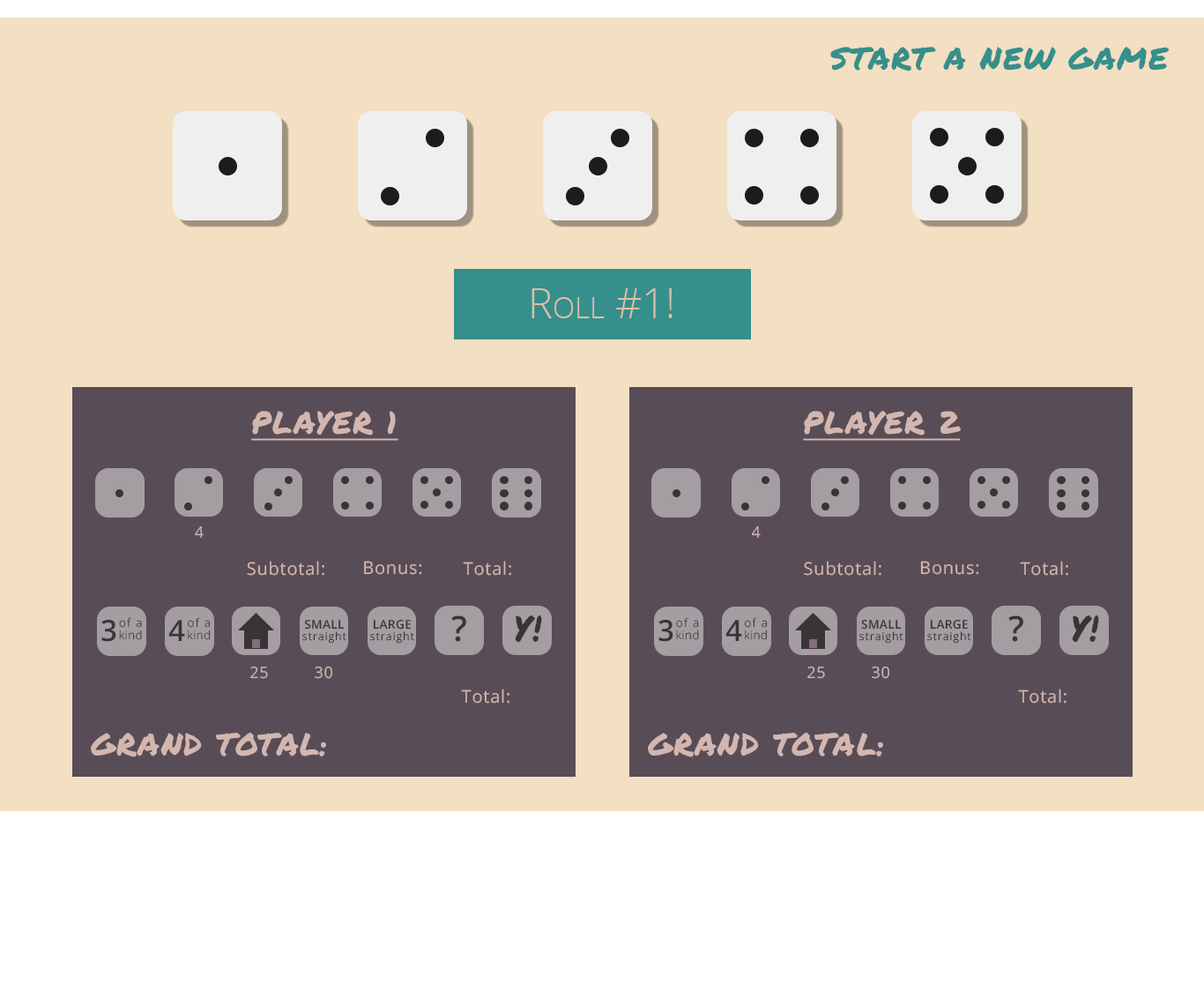
<style>
.page{position:relative;width:1204px;height:991px;background:#f3dfc1}
.page>*{position:absolute;margin:0}
.t1{font:31.1px "PermanentMarker";letter-spacing:0.04em;color:#368f8b;text-transform:uppercase}
.t2{font:41.1px "OpenSans-Light";color:#d3b6af;font-variant:small-caps}
.t3{font:31.1px "PermanentMarker";letter-spacing:0.04em;color:#d3b6af;text-transform:uppercase;text-decoration:underline}
.t4{font:15.9px "OpenSans";letter-spacing:0.04em;color:#d3b6af;text-transform:uppercase}
.t5{font:17.6px "OpenSans";letter-spacing:0.04em;color:#d3b6af}
.t6{font:11.7px/11.7px "OpenSans-Light";letter-spacing:0.1em}
.t7{font:11.7px/11.7px "OpenSans-Light";letter-spacing:0.04em}
.t8{font:34.7px "OpenSans-Semibold";letter-spacing:0.04em;color:#3a3439;text-transform:uppercase}
.t9{font:34.7px "PermanentMarker";letter-spacing:0.04em;color:#3a3439;text-transform:uppercase}
.t10{font:29.3px "OpenSans-Semibold";letter-spacing:0.04em;color:#3a3439;text-transform:uppercase}
.t11{font:10.8px/11.4px "OpenSans-Light";letter-spacing:0.1em;color:#3a3439}
.t12{font:12.1px/11.4px "OpenSans-Semibold";letter-spacing:0.02em;color:#3a3439;text-transform:uppercase}
.t13{font:31.1px "PermanentMarker";letter-spacing:0.04em;color:#d3b6af;text-transform:uppercase}
</style>
<div class="page">
<p class="t1" style="left:830px;top:47px;width:339px;height:24px">start a new game</p>
<p class="t2" style="left:531px;top:288px;width:141px;height:30px">Roll #1!</p>
<p class="t3" style="left:251px;top:411px;width:147px;height:30px">player 1</p>
<p class="t3" style="left:803px;top:411px;width:158px;height:30px">player 2</p>
<p class="t4" style="left:195px;top:526px;width:9px;height:12px">4</p>
<p class="t4" style="left:751px;top:525px;width:10px;height:13px">4</p>
<p class="t5" style="left:247px;top:560px;width:77px;height:15px">Subtotal:</p>
<p class="t5" style="left:364px;top:560px;width:58px;height:15px">Bonus:</p>
<p class="t5" style="left:463px;top:560px;width:48px;height:15px">Total:</p>
<p class="t5" style="left:804px;top:560px;width:77px;height:15px">Subtotal:</p>
<p class="t5" style="left:920px;top:560px;width:59px;height:15px">Bonus:</p>
<p class="t5" style="left:1020px;top:560px;width:48px;height:15px">Total:</p>
<p class="t6" style="left:119px;top:617px;width:23px;height:23px;text-align:center">of a <span class="t7">kind</span></p>
<p class="t6" style="left:188px;top:617px;width:23px;height:23px;text-align:center">of a <span class="t7">kind</span></p>
<p class="t8" style="left:451px;top:615px;width:15px;height:27px">?</p>
<p class="t9" style="left:515px;top:614px;width:27px;height:28px">y!</p>
<p class="t6" style="left:676px;top:617px;width:23px;height:23px;text-align:center">of a <span class="t7">kind</span></p>
<p class="t6" style="left:745px;top:617px;width:22px;height:23px;text-align:center">of a <span class="t7">kind</span></p>
<p class="t8" style="left:1008px;top:615px;width:15px;height:27px">?</p>
<p class="t9" style="left:1072px;top:614px;width:27px;height:28px">y!</p>
<p class="t10" style="left:101px;top:620px;width:15px;height:22px">3</p>
<p class="t10" style="left:168px;top:620px;width:17px;height:21px">4</p>
<p class="t11" style="left:302px;top:619px;width:44px;height:24px;text-align:center"><span class="t12">Small<br></span>straight</p>
<p class="t11" style="left:370px;top:619px;width:44px;height:24px;text-align:center"><span class="t12">large<br></span>straight</p>
<p class="t10" style="left:658px;top:620px;width:15px;height:22px">3</p>
<p class="t10" style="left:725px;top:620px;width:17px;height:21px">4</p>
<p class="t11" style="left:859px;top:619px;width:44px;height:24px;text-align:center"><span class="t12">Small<br></span>straight</p>
<p class="t11" style="left:927px;top:619px;width:44px;height:24px;text-align:center"><span class="t12">large<br></span>straight</p>
<p class="t4" style="left:250px;top:665px;width:18px;height:14px">25</p>
<p class="t4" style="left:315px;top:665px;width:18px;height:14px">30</p>
<p class="t4" style="left:807px;top:665px;width:18px;height:14px">25</p>
<p class="t4" style="left:872px;top:665px;width:18px;height:14px">30</p>
<p class="t5" style="left:461px;top:688px;width:48px;height:15px">Total:</p>
<p class="t5" style="left:1018px;top:688px;width:48px;height:15px">Total:</p>
<p class="t13" style="left:91px;top:731px;width:235px;height:26px">Grand Total:</p>
<p class="t13" style="left:648px;top:731px;width:235px;height:26px">Grand Total:</p>
</div>
